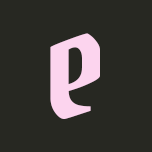
<style>
.page{position:relative;width:152px;height:152px;background:#272822}
.page>*{position:absolute;margin:0}
.t1{font:150px "PirataOne-Regular";letter-spacing:0.01em;color:#fcd4ee}
</style>
<div class="page">
<p class="t1" style="left:50px;top:33px;width:50px;height:86px">e</p>
</div>
